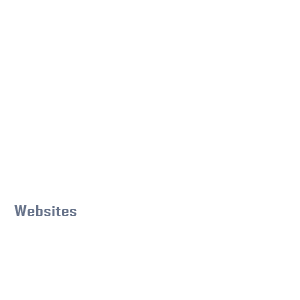
<style>
.page{position:relative;width:300px;height:300px;background:#ffffff}
.page>*{position:absolute;margin:0}
.t1{font:14px "AgencyFB-Bold";color:#667289;scale:1.46 1}
</style>
<div class="page">
<p class="t1" style="left:14px;top:205px;width:63px;height:11px">Websites</p>
</div>
